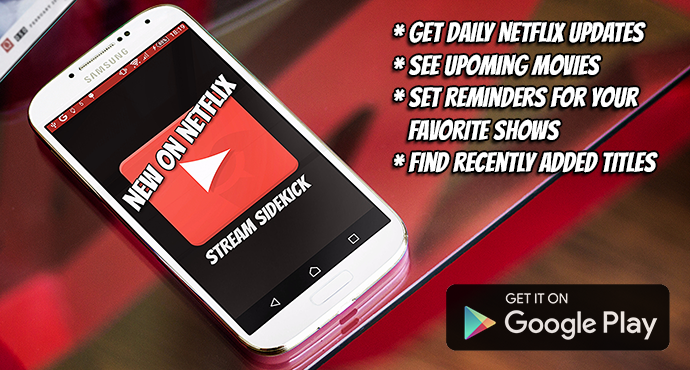
<style>
.page{position:relative;width:690px;height:370px}
.page>*{position:absolute;margin:0}
.t1{font:27.1px "Bangers-Regular";color:#ffffff}
</style>
<div class="page">
<p class="t1" style="left:394px;top:21px;width:264px;height:152px">* Get Daily Netflix Updates<br>* See Upoming movies<br>* Set Reminders for your <br>   favorite shows<br>* Find recently added titles</p>
</div>
